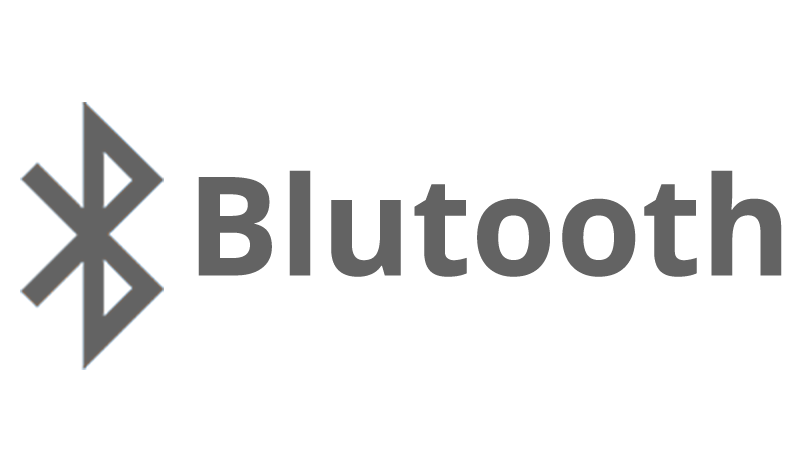
<style>
.page{position:relative;width:800px;height:470px;background:#ffffff}
.page>*{position:absolute;margin:0}
.t1{font:137.5px "OpenSans-Bold";color:#636363}
</style>
<div class="page">
<p class="t1" style="left:198px;top:170px;width:584px;height:107px">Blutooth</p>
</div>
